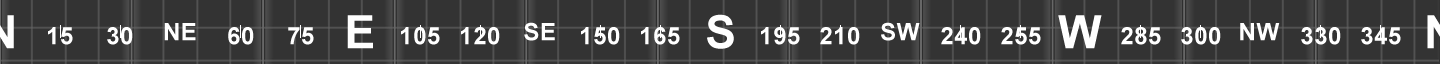
<style>
.page{position:relative;width:1440px;height:64px;background:#333333}
.page>*{position:absolute;margin:0}
.t1{font:46px "Arial-BoldMT";letter-spacing:0.02em;color:#ffffff}
.t2{font:24px "Arial-BoldMT";letter-spacing:0.02em;color:#ffffff}
</style>
<div class="page">
<p class="t1" style="left:347px;top:15px;width:26px;height:34px">E</p>
<p class="t1" style="left:707px;top:14px;width:27px;height:35px">S</p>
<p class="t1" style="left:1058px;top:15px;width:44px;height:34px">W</p>
<p class="t2" style="left:48px;top:27px;width:25px;height:18px">15</p>
<p class="t2" style="left:107px;top:27px;width:26px;height:18px">30</p>
<p class="t2" style="left:164px;top:23px;width:32px;height:18px">NE</p>
<p class="t2" style="left:228px;top:27px;width:26px;height:18px">60</p>
<p class="t2" style="left:288px;top:27px;width:26px;height:18px">75</p>
<p class="t2" style="left:401px;top:27px;width:39px;height:18px">105</p>
<p class="t2" style="left:461px;top:27px;width:39px;height:18px">120</p>
<p class="t2" style="left:524px;top:22px;width:31px;height:19px">SE</p>
<p class="t2" style="left:581px;top:27px;width:39px;height:18px">150</p>
<p class="t2" style="left:641px;top:27px;width:39px;height:18px">165</p>
<p class="t2" style="left:761px;top:27px;width:39px;height:18px">195</p>
<p class="t2" style="left:820px;top:27px;width:40px;height:18px">210</p>
<p class="t2" style="left:881px;top:22px;width:39px;height:19px">SW</p>
<p class="t2" style="left:941px;top:27px;width:40px;height:18px">240</p>
<p class="t2" style="left:1001px;top:27px;width:40px;height:18px">255</p>
<p class="t2" style="left:1121px;top:27px;width:40px;height:18px">285</p>
<p class="t2" style="left:1181px;top:27px;width:40px;height:18px">300</p>
<p class="t2" style="left:1240px;top:23px;width:40px;height:18px">NW</p>
<p class="t2" style="left:1301px;top:27px;width:40px;height:18px">330</p>
<p class="t2" style="left:1361px;top:27px;width:40px;height:18px">345</p>
</div>
